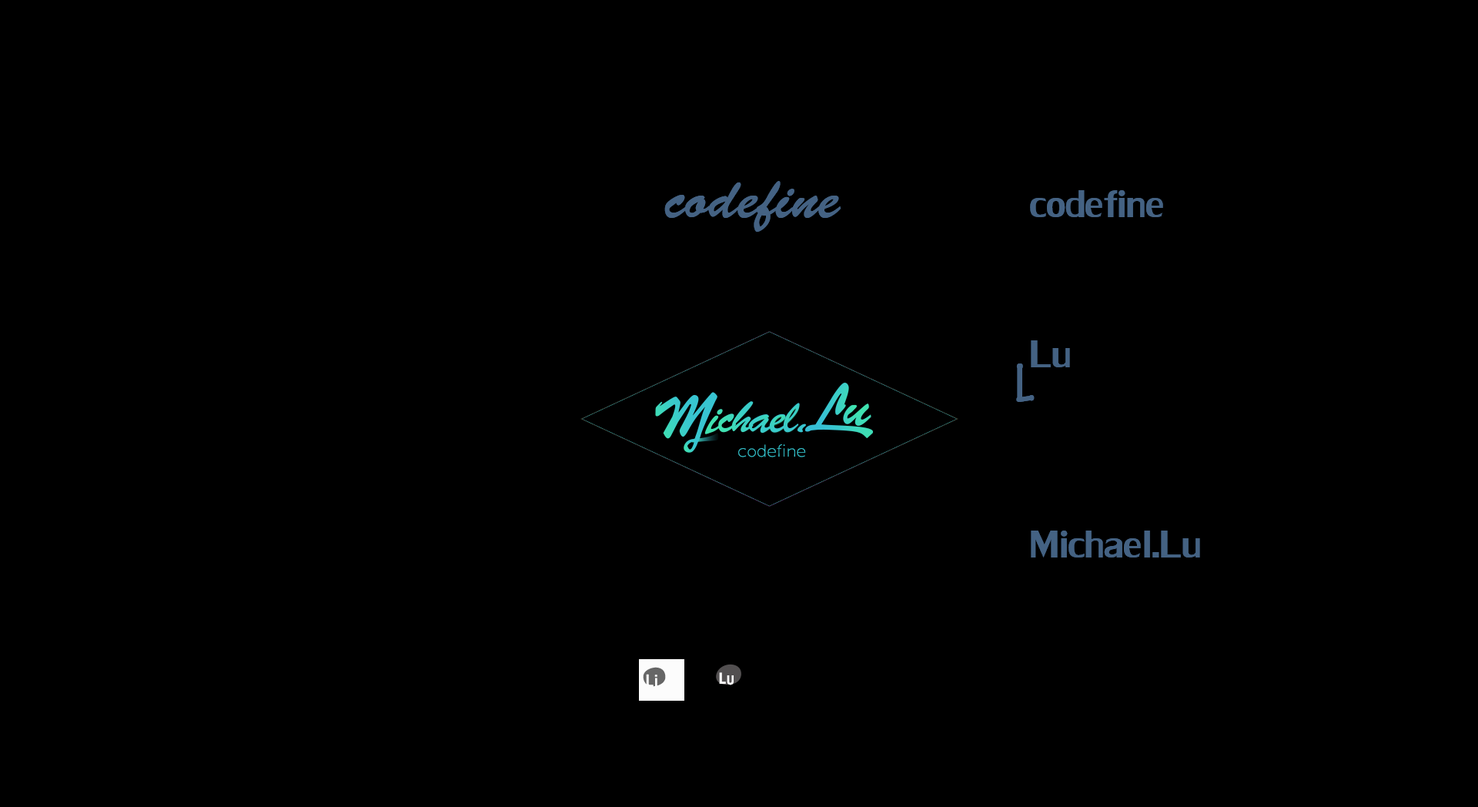
<style>
.page{position:relative;width:1478px;height:807px;background:#000000}
.page>*{position:absolute;margin:0}
.t1{font:58.2px "BrushScriptStd";color:#446283}
.t2{font:58.2px "LilyUPC";color:#446283}
.t3{font:58.4px "TektonPro-BoldCond";color:#446283}
.t4{font:16.4px "HYYuanLongHei-CEJ";color:#38c6d0}
.t5{font:14px "HYYaKuHeiW";color:#ffffff;scale:0.86 1}
.t6{font:11.6px "HYYaKuHeiW";color:#ffffff;scale:0.86 1}
</style>
<div class="page">
<p class="t1" style="left:664px;top:181px;width:177px;height:51px">codefine</p>
<p class="t2" style="left:1030px;top:190px;width:133px;height:27px">codefine</p>
<p class="t2" style="left:1031px;top:340px;width:39px;height:27px">Lu</p>
<p class="t3" style="left:1016px;top:363px;width:19px;height:39px">L</p>
<p class="t4" style="left:738px;top:444px;width:68px;height:13px">codefine</p>
<p class="t2" style="left:1031px;top:530px;width:169px;height:27px">Michael.Lu</p>
<p class="t5" style="left:719px;top:672px;width:7px;height:12px">L</p>
<p class="t6" style="left:727px;top:675px;width:7px;height:10px">U</p>
</div>
